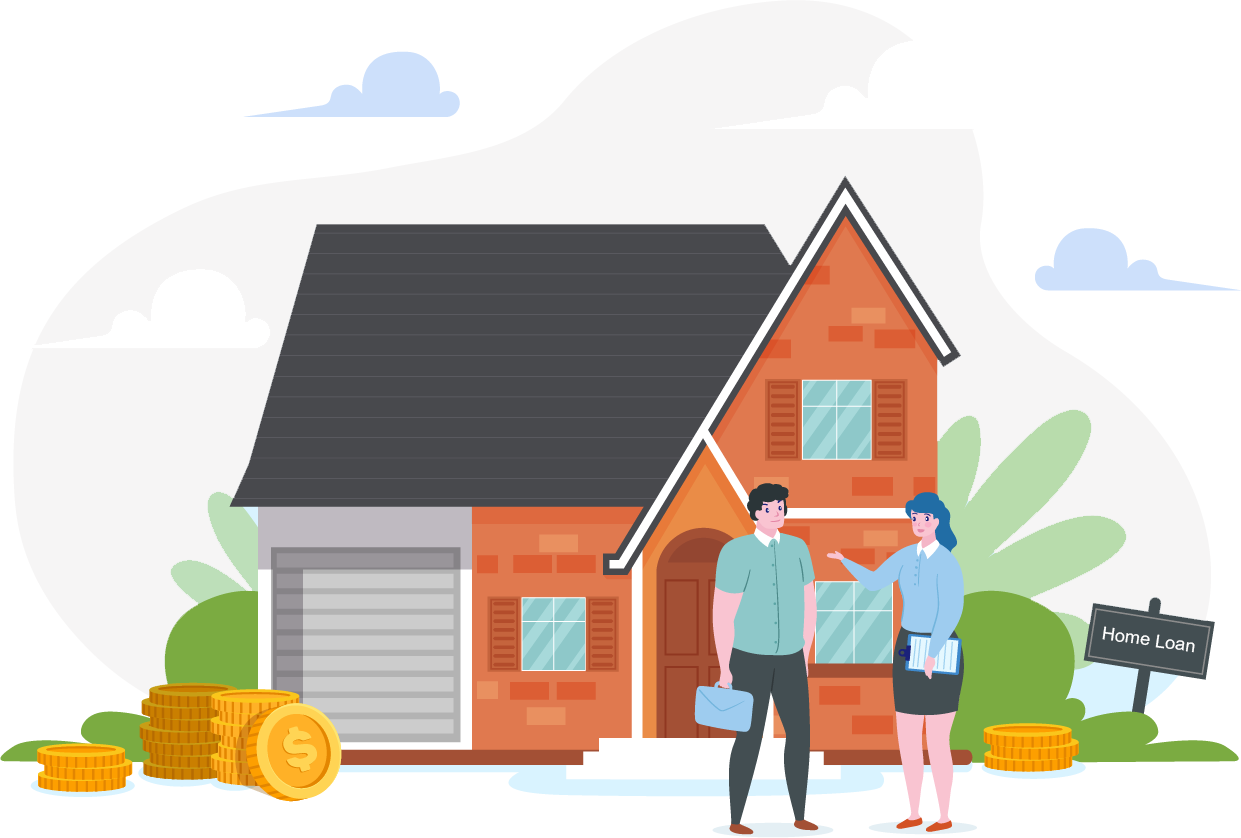
<style>
.page{position:relative;width:1241px;height:838px;background:#ffffff}
.page>*{position:absolute;margin:0}
.t1{font:17.6px "ArialMT";color:#ffffff;scale:1.04 1}
</style>
<div class="page">
<p class="t1" style="left:1102px;top:626px;width:93px;height:27px;rotate:8deg">Home Loan</p>
</div>
